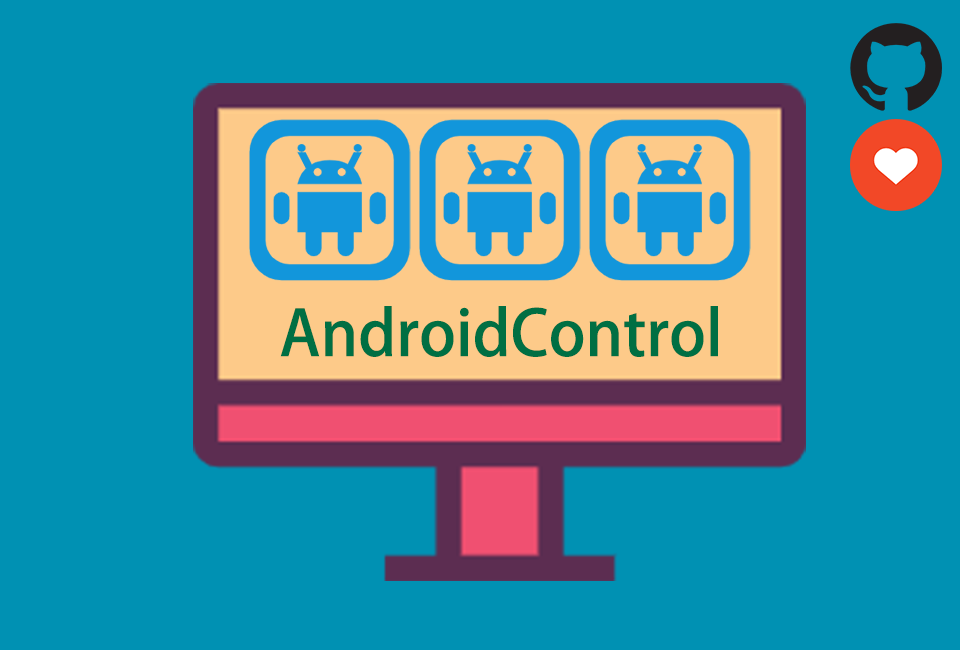
<style>
.page{position:relative;width:960px;height:650px;background:#0091b3}
.page>*{position:absolute;margin:0}
.t1{font:62.5px "AdobeHeitiStd-Regular";color:#006f43}
</style>
<div class="page">
<p class="t1" style="left:280px;top:306px;width:438px;height:51px">AndroidControl</p>
</div>
